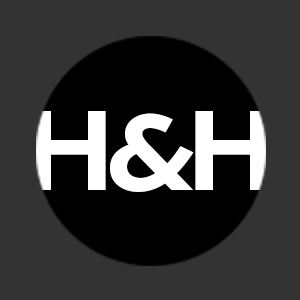
<style>
.page{position:relative;width:300px;height:300px;background:#333333}
.page>*{position:absolute;margin:0}
.t1{font:121.1px "SweetSansPro-Bold";letter-spacing:-0.12em;color:#ffffff}
</style>
<div class="page">
<p class="t1" style="left:33px;top:111px;width:235px;height:81px">H&amp;H</p>
</div>
